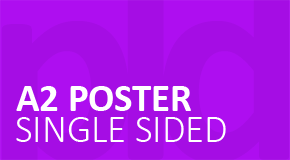
<style>
.page{position:relative;width:290px;height:160px;background:#a50de4}
.page>*{position:absolute;margin:0}
.t1{font:38.8px "Calibri-Bold";color:#ffffff}
.t2{font:38.8px "Calibri-Light";color:#ffffff}
</style>
<div class="page">
<p class="t1" style="left:16px;top:86px;width:175px;height:25px">A2 POSTER</p>
<p class="t2" style="left:16px;top:117px;width:210px;height:25px">SINGLE SIDED</p>
</div>
